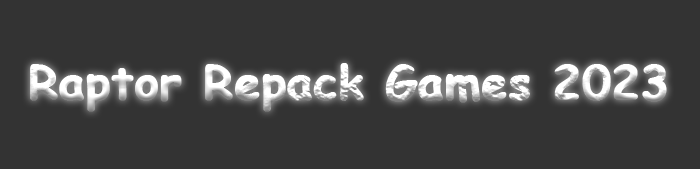
<style>
.page{position:relative;width:700px;height:169px;background:#333333}
.page>*{position:absolute;margin:0}
.t1{font:45.8px "ComicSansMS-Bold";color:#ffffff;font-weight:bold}
</style>
<div class="page">
<p class="t1" style="left:30px;top:63px;width:637px;height:49px">Raptor Repack Games 2023</p>
</div>
